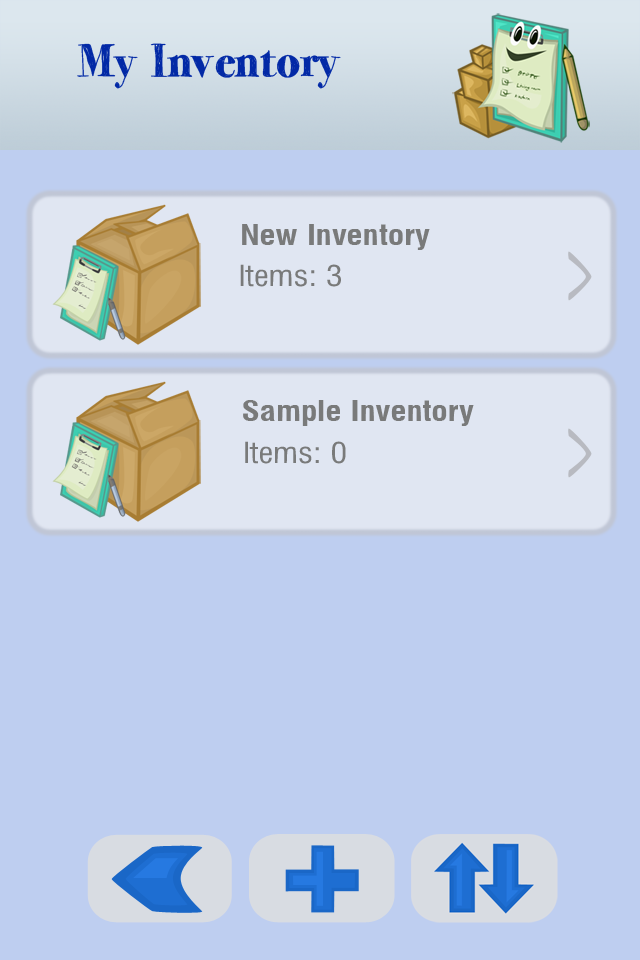
<style>
.page{position:relative;width:640px;height:960px;background:#becef0}
.page>*{position:absolute;margin:0}
.t1{font:28.3px "MilfordBold";color:#797a7a}
.t2{font:28.3px "Milford";color:#797a7a}
</style>
<div class="page">
<p class="t1" style="left:242px;top:224px;width:188px;height:26px">New Inventory</p>
<p class="t2" style="left:240px;top:264px;width:101px;height:23px">Items: 3</p>
<p class="t1" style="left:243px;top:400px;width:231px;height:26px">Sample Inventory</p>
<p class="t2" style="left:245px;top:441px;width:101px;height:23px">Items: 0</p>
</div>
